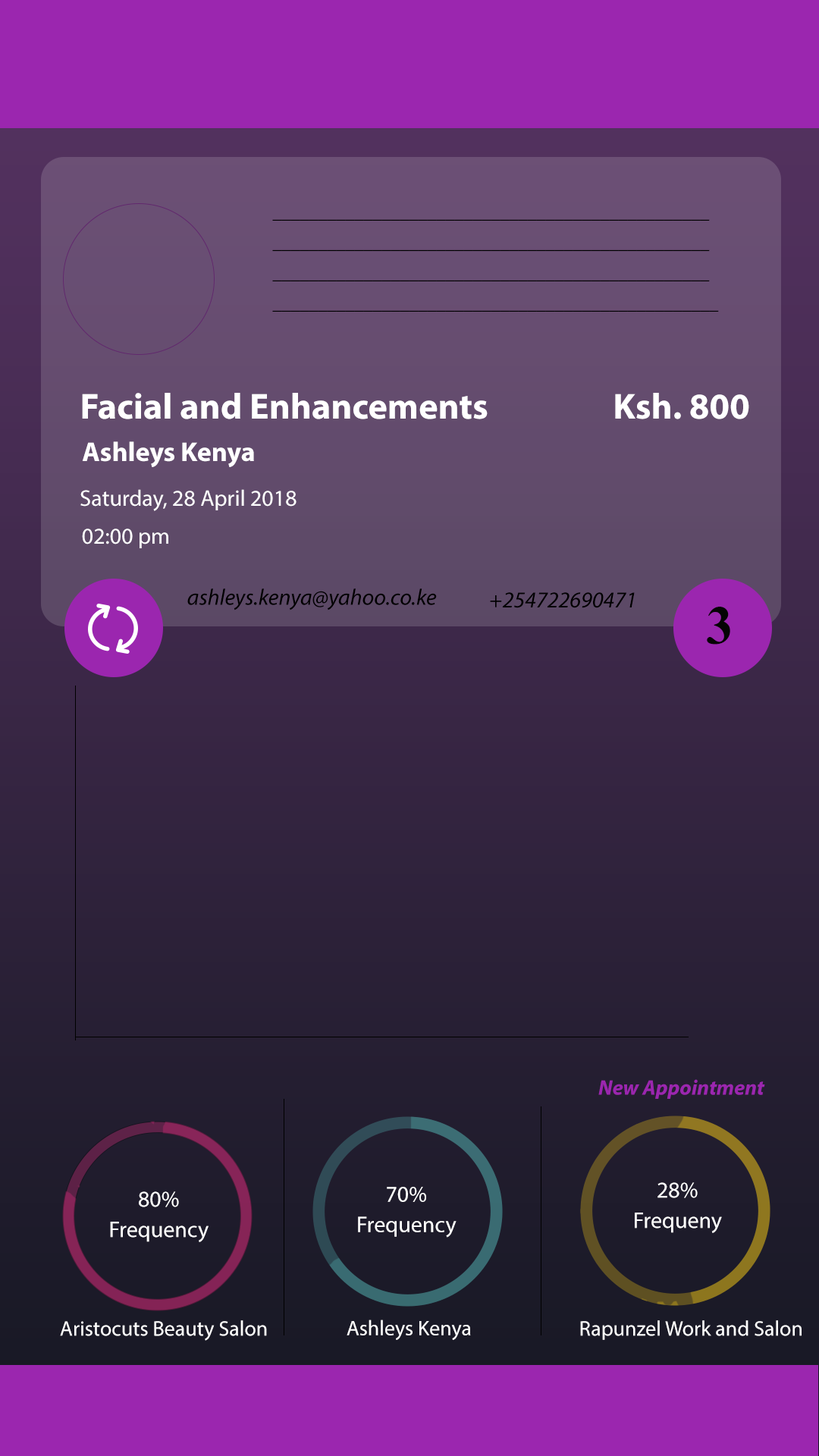
<style>
.page{position:relative;width:819px;height:1456px}
.page>*{position:absolute;margin:0}
.t1{font:18.2px/15.2px "MyriadPro-It";color:#000000}
.t2{font:36.4px "MyriadPro-Bold";color:#ffffff}
.t3{font:27.3px "MyriadPro-Bold";color:#ffffff}
.t4{font:22.7px "MyriadPro-Regular";color:#ffffff}
.t5{font:22.7px "MyriadPro-It";color:#000000}
.t6{font:54.6px "TimesNewRomanPS-BoldMT";color:#050404}
.t7{font:21.2px "MyriadPro-BoldIt";color:#9b26af}
.t8{font:22.7px/15.2px "MyriadPro-Regular";color:#ffffff}
.t9{font:21.2px "MyriadPro-Regular";color:#ffffff}
</style>
<div class="page">
<p class="t1" style="left:272px;top:219px;width:447px;height:93px">________________________________________________<br><br>________________________________________________<br><br>________________________________________________<br><br>_________________________________________________</p>
<p class="t2" style="left:82px;top:393px;width:406px;height:26px">Facial and Enhancements</p>
<p class="t2" style="left:615px;top:393px;width:134px;height:26px">Ksh. 800</p>
<p class="t3" style="left:82px;top:441px;width:172px;height:26px">Ashleys Kenya</p>
<p class="t4" style="left:80px;top:489px;width:217px;height:22px">Saturday, 28 April 2018</p>
<p class="t4" style="left:82px;top:529px;width:86px;height:19px">02:00 pm</p>
<p class="t5" style="left:187px;top:588px;width:250px;height:22px">ashleys.kenya@yahoo.co.ke</p>
<p class="t5" style="left:490px;top:592px;width:145px;height:16px">+254722690471</p>
<p class="t6" style="left:707px;top:607px;width:23px;height:38px">3</p>
<p class="t7" style="left:598px;top:1079px;width:167px;height:20px">New Appointment</p>
<p class="t8" style="left:110px;top:1191px;width:99px;height:51px;text-align:center">80%<br><br>Frequency</p>
<p class="t8" style="left:358px;top:1187px;width:99px;height:51px;text-align:center">70%<br><br>Frequency</p>
<p class="t8" style="left:635px;top:1182px;width:87px;height:51px;text-align:center">28%<br><br>Frequeny</p>
<p class="t9" style="left:60px;top:1320px;width:207px;height:21px">Aristocuts Beauty Salon</p>
<p class="t9" style="left:347px;top:1319px;width:124px;height:21px">Ashleys Kenya</p>
<p class="t9" style="left:580px;top:1320px;width:222px;height:20px">Rapunzel Work and Salon</p>
</div>
